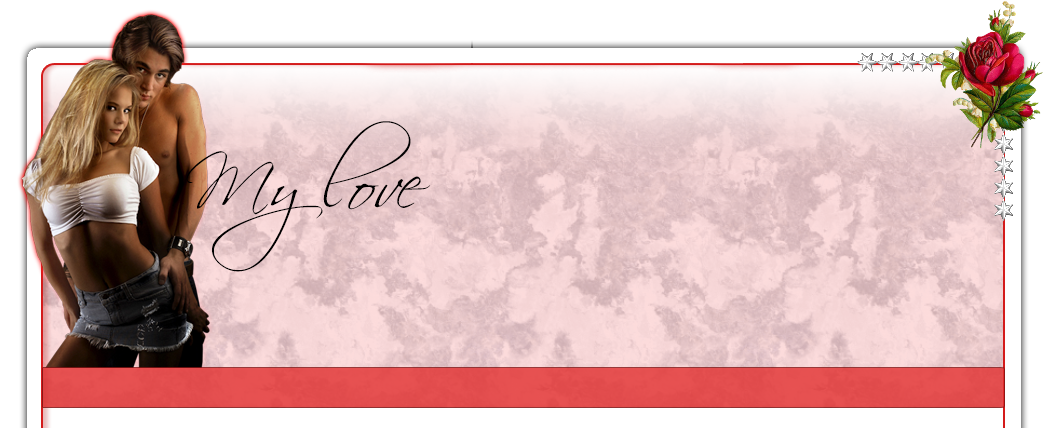
<style>
.page{position:relative;width:1046px;height:428px}
.page>*{position:absolute;margin:0}
.t1{font:72px/234.5px "Scriptina";color:#000000}
</style>
<div class="page">
<p class="t1" style="left:186px;top:121px;width:245px;height:151px">My love</p>
</div>
